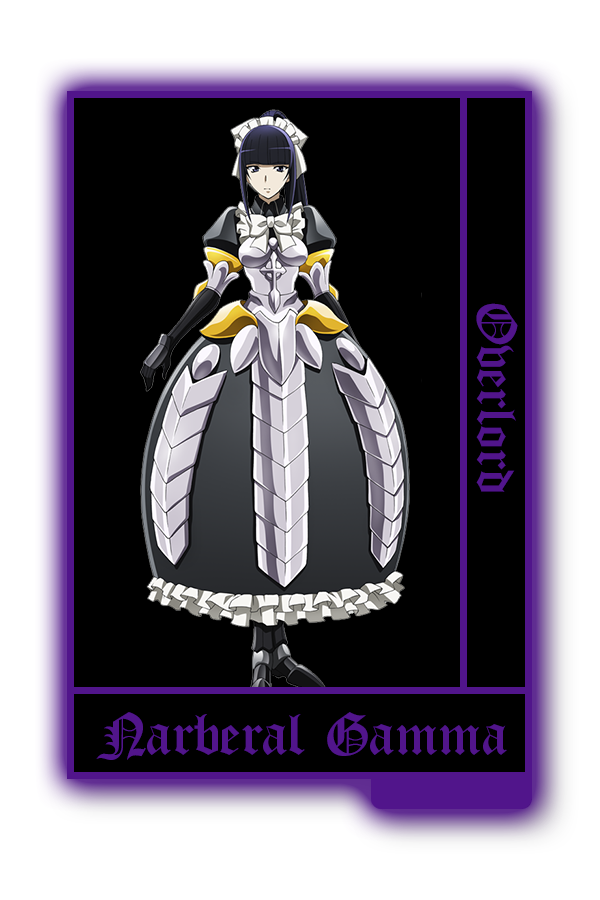
<style>
.page{position:relative;width:600px;height:900px;background:#000000}
.page>*{position:absolute;margin:0}
.t1{font:61.5px "OldLondon";color:#51158b}
.t2{font:65.2px "OldLondon";color:#51158b}
</style>
<div class="page">
<p class="t1" style="left:476px;top:303px;width:42px;height:189px;rotate:90deg">Overlord</p>
<p class="t2" style="left:96px;top:712px;width:411px;height:48px">Narberal Gamma</p>
</div>
